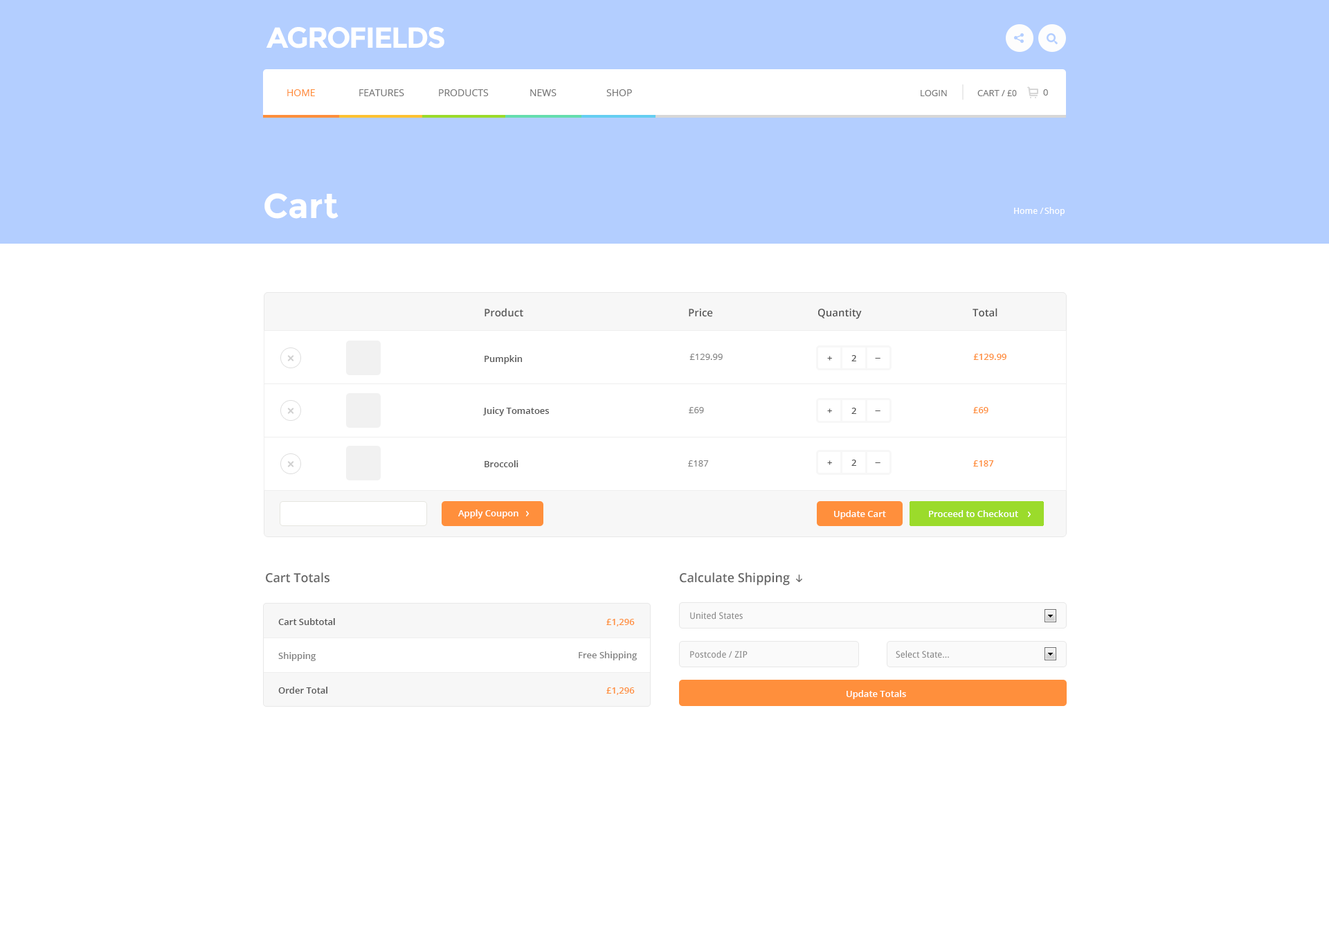
<style>
.page{position:relative;width:1329px;height:949px;background:#ffffff}
.page>*{position:absolute;margin:0}
.t1{font:29.1px "Montserrat-Bold";letter-spacing:-0.05em;color:#ffffff;text-transform:uppercase}
.t2{font:9.7px "OpenSans";color:#ff8f3c;text-transform:uppercase}
.t3{font:9.7px "OpenSans";color:#767676;text-transform:uppercase}
.t4{font:9px "OpenSans";color:#767676;text-transform:uppercase}
.t5{font:8.3px "OpenSans";color:#767676;text-transform:uppercase}
.t6{font:34.6px "Montserrat-Bold";color:#ffffff}
.t7{font:9px "DroidSans";color:#ffffff}
.t8{font:10.4px "OpenSans-Semibold";color:#565656}
.t9{font:9px "OpenSans";color:#838383;text-transform:uppercase}
.t10{font:9px "OpenSans";color:#838383}
.t11{font:9px "OpenSans-Semibold";color:#ff8f3c;text-transform:uppercase}
.t12{font:9px "OpenSans-Semibold";color:#ff8f3c}
.t13{font:9px "OpenSans-Semibold";color:#565656}
.t14{font:9px "OpenSans-Semibold";color:#ffffff}
.t15{font:12.5px "OpenSans-Semibold";color:#656565}
.t16{font:9px "DroidSans";color:#838383}
.t17{font:9px "OpenSans-Semibold";color:#838383}
</style>
<div class="page">
<p class="t1" style="left:266px;top:27px;width:178px;height:21px">Agrofields</p>
<p class="t2" style="left:287px;top:89px;width:28px;height:7px">Home</p>
<p class="t3" style="left:359px;top:89px;width:45px;height:7px">Features</p>
<p class="t3" style="left:439px;top:89px;width:50px;height:7px">Products</p>
<p class="t3" style="left:530px;top:89px;width:27px;height:7px">News</p>
<p class="t3" style="left:606px;top:89px;width:26px;height:7px">Shop</p>
<p class="t4" style="left:1043px;top:89px;width:5px;height:7px">0</p>
<p class="t4" style="left:921px;top:90px;width:26px;height:6px">Login</p>
<p class="t4" style="left:978px;top:90px;width:39px;height:6px">cart / <span class="t5">£0</span></p>
<p class="t6" style="left:264px;top:193px;width:75px;height:26px">Cart</p>
<p class="t7" style="left:1014px;top:208px;width:30px;height:6px">Home /</p>
<p class="t7" style="left:1045px;top:207px;width:20px;height:9px">Shop</p>
<p class="t8" style="left:485px;top:308px;width:38px;height:9px">Product</p>
<p class="t8" style="left:689px;top:308px;width:24px;height:9px">Price</p>
<p class="t8" style="left:818px;top:308px;width:44px;height:11px">Quantity</p>
<p class="t8" style="left:973px;top:308px;width:25px;height:9px">Total</p>
<p class="t9" style="left:690px;top:354px;width:33px;height:6px"><span class="t10"> </span>£129.99</p>
<p class="t11" style="left:973px;top:354px;width:34px;height:6px"><span class="t12"> </span>£129.99</p>
<p class="t13" style="left:485px;top:355px;width:38px;height:9px">Pumpkin</p>
<p class="t13" style="left:827px;top:356px;width:5px;height:5px">+</p>
<p class="t13" style="left:852px;top:355px;width:4px;height:6px">2</p>
<p class="t13" style="left:875px;top:358px;width:3px;height:1px">-</p>
<p class="t13" style="left:483px;top:407px;width:66px;height:9px">Juicy Tomatoes</p>
<p class="t9" style="left:689px;top:407px;width:15px;height:6px">£69</p>
<p class="t13" style="left:827px;top:408px;width:5px;height:5px">+</p>
<p class="t13" style="left:852px;top:408px;width:4px;height:6px">2</p>
<p class="t13" style="left:875px;top:411px;width:3px;height:0px">-</p>
<p class="t11" style="left:973px;top:407px;width:16px;height:6px">£69</p>
<p class="t13" style="left:485px;top:460px;width:34px;height:7px">Broccoli</p>
<p class="t9" style="left:688px;top:460px;width:21px;height:7px">£187</p>
<p class="t13" style="left:827px;top:460px;width:5px;height:5px">+</p>
<p class="t13" style="left:852px;top:460px;width:4px;height:6px">2</p>
<p class="t11" style="left:973px;top:460px;width:21px;height:7px">£187</p>
<p class="t13" style="left:875px;top:462px;width:3px;height:1px">-</p>
<p class="t14" style="left:458px;top:510px;width:61px;height:9px">Apply Coupon</p>
<p class="t14" style="left:834px;top:510px;width:52px;height:9px">Update Cart</p>
<p class="t14" style="left:929px;top:510px;width:89px;height:7px">Proceed to Checkout</p>
<p class="t15" style="left:266px;top:573px;width:64px;height:10px">Cart Totals</p>
<p class="t15" style="left:680px;top:573px;width:110px;height:13px">Calculate Shipping</p>
<p class="t16" style="left:690px;top:612px;width:53px;height:8px">United States</p>
<p class="t13" style="left:278px;top:618px;width:57px;height:7px">Cart Subtotal</p>
<p class="t11" style="left:606px;top:619px;width:29px;height:8px">£1,296</p>
<p class="t17" style="left:278px;top:652px;width:38px;height:9px">Shipping</p>
<p class="t17" style="left:579px;top:651px;width:59px;height:9px">Free Shipping</p>
<p class="t16" style="left:690px;top:651px;width:58px;height:7px">Postcode / ZIP</p>
<p class="t16" style="left:896px;top:651px;width:53px;height:7px">Select State...</p>
<p class="t13" style="left:278px;top:687px;width:49px;height:7px">Order Total</p>
<p class="t11" style="left:606px;top:687px;width:29px;height:8px">£1,296</p>
<p class="t14" style="left:847px;top:690px;width:59px;height:9px">Update Totals</p>
</div>
